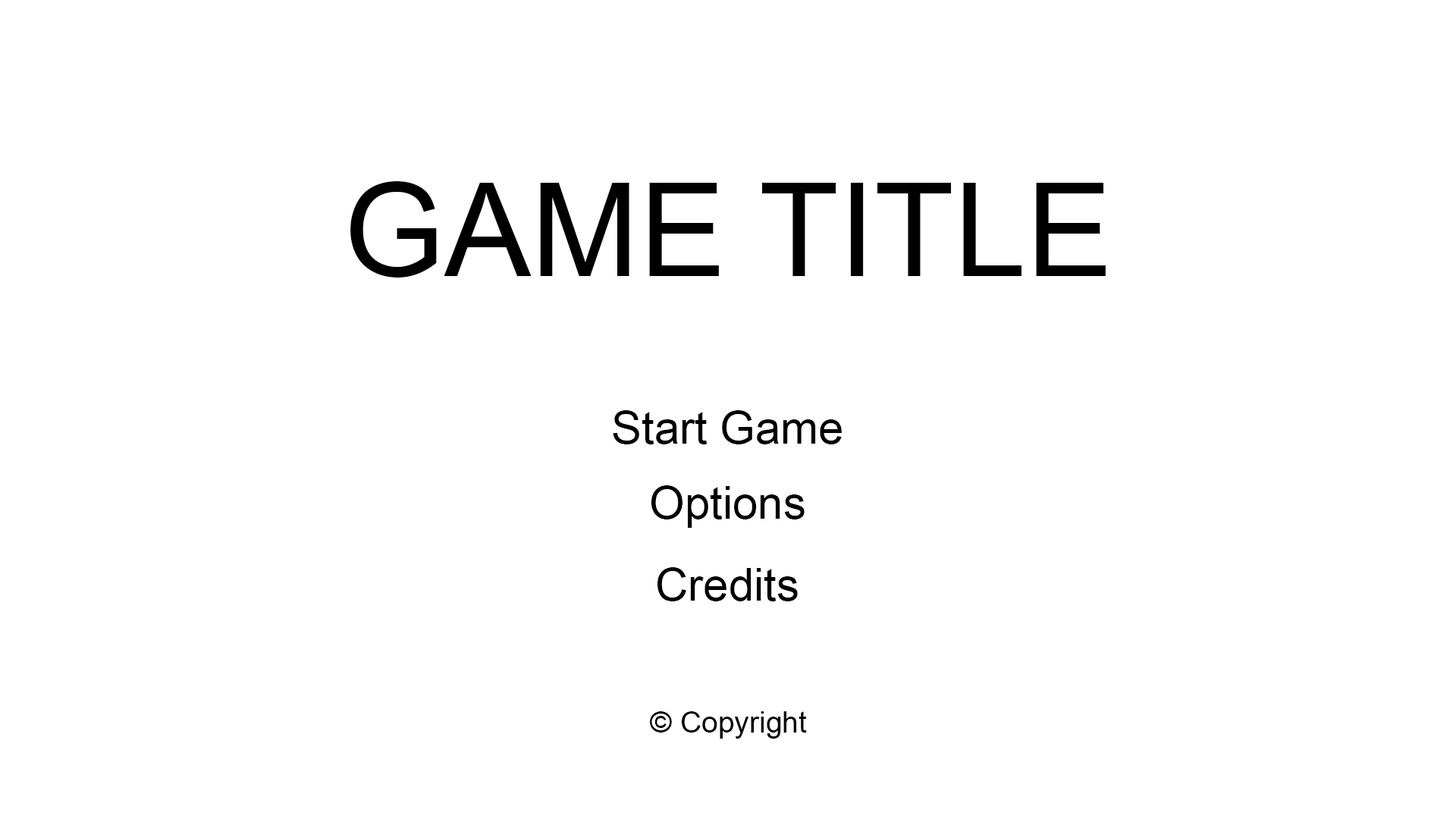
<style>
.page{position:relative;width:1456px;height:819px;background:#ffffff}
.page>*{position:absolute;margin:0}
.t1{font:129.5px "ArialMT";color:#000000}
.t2{font:45.5px "ArialMT";color:#000000}
.t3{font:29.5px "ArialMT";color:#000000}
</style>
<div class="page">
<p class="t1" style="left:350px;top:181px;width:756px;height:97px">GAME TITLE</p>
<p class="t2" style="left:613px;top:410px;width:229px;height:34px">Start Game</p>
<p class="t2" style="left:651px;top:485px;width:154px;height:43px">Options</p>
<p class="t2" style="left:657px;top:567px;width:141px;height:34px">Credits</p>
<p class="t3" style="left:650px;top:711px;width:157px;height:28px">© Copyright</p>
</div>
